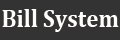
<style>
.page{position:relative;width:120px;height:40px;background:#333333}
.page>*{position:absolute;margin:0}
.t1{font:25.3px "Cambria-Bold";color:#fffefa;scale:0.91 1}
</style>
<div class="page">
<p class="t1" style="left:2px;top:9px;width:117px;height:23px">Bill System</p>
</div>
